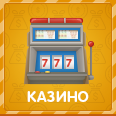
<style>
.page{position:relative;width:116px;height:116px}
.page>*{position:absolute;margin:0}
.t1{font:15px "RotondaC-Bold";letter-spacing:0.04em;color:#fffffe;text-transform:uppercase}
</style>
<div class="page">
<p class="t1" style="left:27px;top:91px;width:62px;height:11px">Казино</p>
</div>
